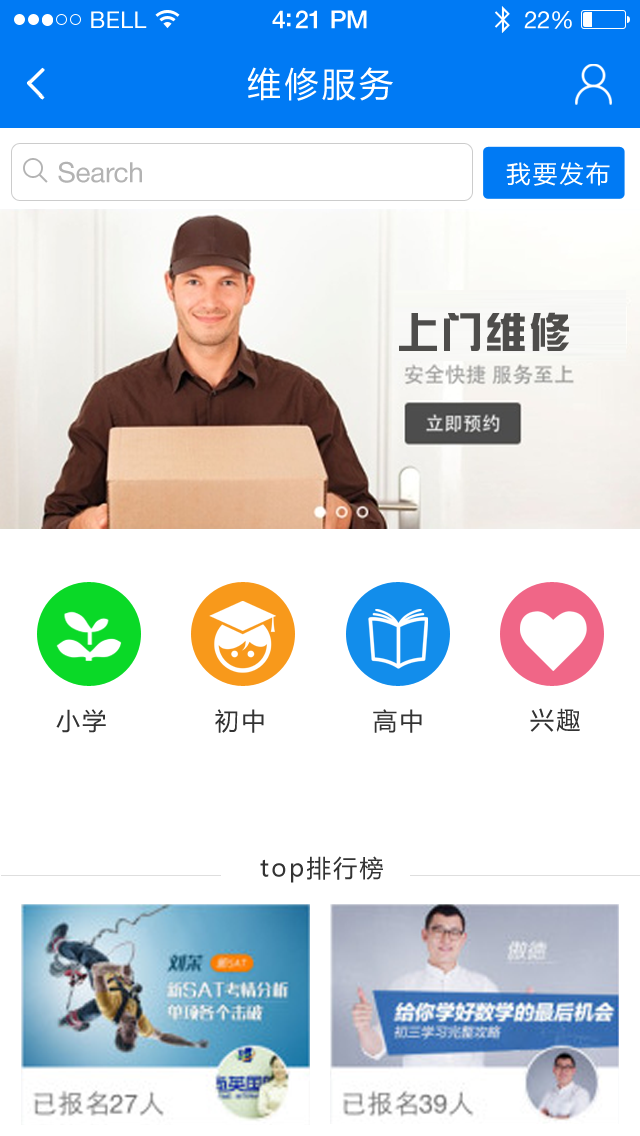
<style>
.page{position:relative;width:640px;height:1136px;background:#ffffff}
.page>*{position:absolute;margin:0}
.t1{font:23px "HelveticaNeue";letter-spacing:0.02em;color:#ffffff}
.t2{font:25px "HelveticaNeue-Medium";letter-spacing:-0.02em;color:#ffffff}
.t3{font:24px "HelveticaNeue";letter-spacing:-0.02em;color:#ffffff}
.t4{font:34px "MicrosoftYaHei";letter-spacing:0.1em;color:#ffffff}
.t5{font:28px "HelveticaNeue";letter-spacing:-0.01em;color:#b3b3b3}
.t6{font:24px "MicrosoftYaHei";letter-spacing:0.1em;color:#ffffff}
.t7{font:40px "SingYiEG-Ultra-GB";letter-spacing:0.1em;color:#4e4d4b}
.t8{font:24px "MicrosoftYaHei";letter-spacing:0.1em;color:#333333}
</style>
<div class="page">
<p class="t1" style="left:91px;top:11px;width:56px;height:17px">BELL</p>
<p class="t2" style="left:272px;top:10px;width:95px;height:19px">4:21 PM</p>
<p class="t3" style="left:524px;top:11px;width:48px;height:18px">22%</p>
<p class="t4" style="left:247px;top:67px;width:146px;height:34px">维修服务</p>
<p class="t5" style="left:58px;top:161px;width:84px;height:22px">Search</p>
<p class="t6" style="left:506px;top:162px;width:104px;height:24px">我要发布</p>
<p class="t7" style="left:399px;top:312px;width:170px;height:39px">上门维修</p>
<p class="t8" style="left:56px;top:709px;width:50px;height:24px">小学</p>
<p class="t8" style="left:215px;top:709px;width:49px;height:24px">初中</p>
<p class="t8" style="left:373px;top:709px;width:49px;height:24px">高中</p>
<p class="t8" style="left:530px;top:708px;width:50px;height:24px">兴趣</p>
<p class="t8" style="left:260px;top:856px;width:123px;height:27px">top排行榜</p>
</div>
